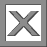
<style>
.page{position:relative;width:47px;height:47px;background:#8c8c8c}
.page>*{position:absolute;margin:0}
.t1{font:48.3px "Arkhip";color:#8c8c8c;scale:1.2 1}
</style>
<div class="page">
<p class="t1" style="left:7px;top:11px;width:34px;height:25px">x</p>
</div>
